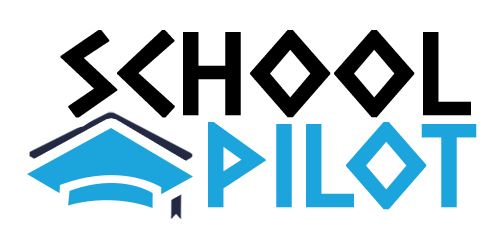
<style>
.page{position:relative;width:500px;height:250px;background:#ffffff}
.page>*{position:absolute;margin:0}
.t1{font:98.4px "DalekPinpointBold";color:#000000;text-transform:uppercase;font-weight:bold}
.t2{font:98.4px "DalekPinpointBold";color:#1ca4dd;text-transform:uppercase;font-weight:bold}
</style>
<div class="page">
<p class="t1" style="left:60px;top:30px;width:411px;height:88px">school</p>
<p class="t2" style="left:208px;top:122px;width:269px;height:88px">pilot</p>
</div>
